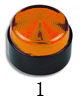
<style>
.page{position:relative;width:80px;height:100px;background:#ffffff}
.page>*{position:absolute;margin:0}
.t1{font:20px "SimSun";color:#000000}
</style>
<div class="page">
<p class="t1" style="left:37px;top:82px;width:7px;height:14px">1</p>
</div>
